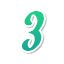
<style>
.page{position:relative;width:64px;height:64px;background:#ffffff}
.page>*{position:absolute;margin:0}
.t1{font:72px "MaroonedOnMarsBB";color:#1cbd8f}
</style>
<div class="page">
<p class="t1" style="left:21px;top:11px;width:23px;height:40px">3</p>
</div>
